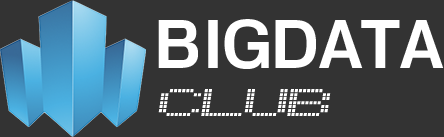
<style>
.page{position:relative;width:444px;height:137px;background:#333333}
.page>*{position:absolute;margin:0}
.t1{font:66.7px "Basic5";color:#ffffff}
.t2{font:33.3px "Alpine-7558S";color:#ffffff}
</style>
<div class="page">
<p class="t1" style="left:158px;top:19px;width:286px;height:50px">BIGDATA</p>
<p class="t2" style="left:158px;top:89px;width:173px;height:27px">CLUB</p>
</div>
